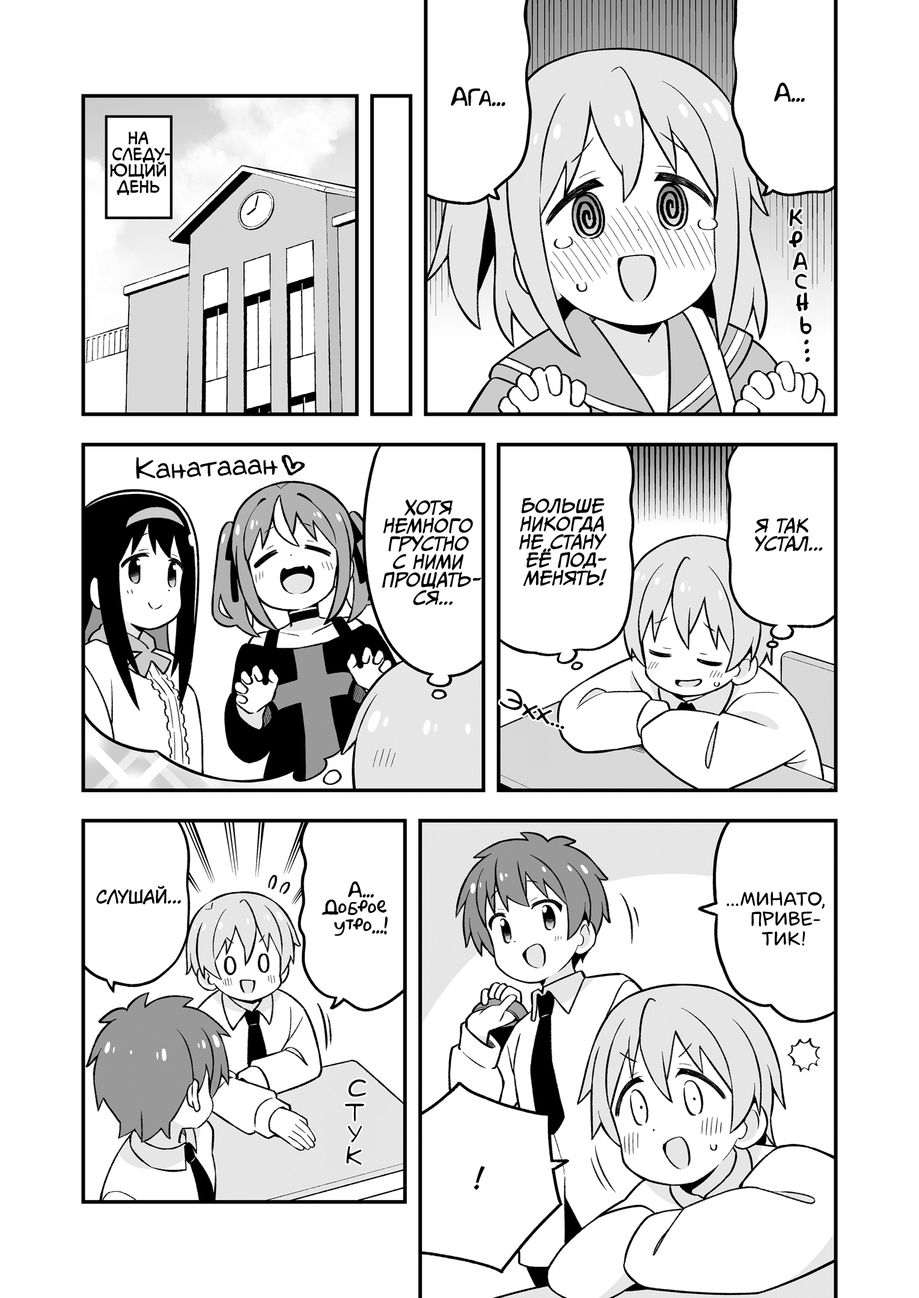
<style>
.page{position:relative;width:919px;height:1298px;background:#ffffff}
.page>*{position:absolute;margin:0}
.t1{font:21.6px "AkbarPlain";color:#000000}
.t2{font:16.2px "v_CCMonologous";color:#000000;text-transform:uppercase}
.t3{font:25.2px "AkbarPlain";color:#000000}
.t4{font:28.8px "v_Augie";color:#000000}
.t5{font:18px "CCMeanwhile";color:#000000;text-transform:uppercase;font-style:italic}
.t6{font:18px "AkbarPlain";color:#000000}
.t7{font:18px "KuraiVoice2";color:#000000;text-transform:uppercase}
.t8{font:19.8px "laCartoonerie";color:#000000;text-transform:uppercase}
.t9{font:23.4px "v_Augie";color:#000000;text-transform:uppercase}
.t10{font:28.8px "v_CCJeffCampbell";color:#000000;text-transform:uppercase}
</style>
<div class="page">
<p class="t1" style="left:451px;top:87px;width:54px;height:19px">Ага...</p>
<p class="t1" style="left:774px;top:82px;width:31px;height:20px">А...</p>
<p class="t2" style="left:110px;top:131px;width:61px;height:64px;text-align:center">На<br>следу-<br>ющий<br>день</p>
<p class="t3" style="left:789px;top:209px;width:13px;height:18px;rotate:-6deg">к</p>
<p class="t3" style="left:788px;top:231px;width:14px;height:17px;rotate:-7deg">р</p>
<p class="t3" style="left:793px;top:252px;width:15px;height:18px;rotate:-5deg">а</p>
<p class="t3" style="left:794px;top:273px;width:13px;height:16px;rotate:-5deg">с</p>
<p class="t3" style="left:796px;top:292px;width:13px;height:19px;rotate:-5deg">н</p>
<p class="t3" style="left:800px;top:316px;width:11px;height:18px;rotate:-6deg">ь</p>
<p class="t3" style="left:804px;top:339px;width:5px;height:5px">.</p>
<p class="t3" style="left:805px;top:349px;width:4px;height:4px">.</p>
<p class="t3" style="left:805px;top:357px;width:5px;height:5px">.</p>
<p class="t4" style="left:136px;top:457px;width:142px;height:22px;rotate:-2deg">Канатааан</p>
<p class="t5" style="left:519px;top:498px;width:88px;height:88px;text-align:center">Больше<br>никогда<br>не стану<br>её под-<br>менять!</p>
<p class="t5" style="left:382px;top:499px;width:99px;height:106px;text-align:center">Хотя<br>немного<br>грустно<br>с ними<br>прощать-<br>ся...</p>
<p class="t5" style="left:755px;top:517px;width:68px;height:35px;text-align:center">Я так<br>устал...</p>
<p class="t4" style="left:499px;top:689px;width:65px;height:40px;rotate:18deg">Эхх...</p>
<p class="t6" style="left:322px;top:881px;width:66px;height:55px;text-align:center">А...<br>Доброе<br>утро...!</p>
<p class="t7" style="left:96px;top:885px;width:85px;height:19px">Слушай...</p>
<p class="t8" style="left:726px;top:891px;width:98px;height:55px;text-align:center">...Минато,<br>приве-<br>тик!</p>
<p class="t9" style="left:348px;top:1079px;width:18px;height:18px">с</p>
<p class="t9" style="left:345px;top:1103px;width:19px;height:18px;rotate:5deg">т</p>
<p class="t9" style="left:347px;top:1125px;width:15px;height:17px;rotate:11deg">у</p>
<p class="t9" style="left:346px;top:1146px;width:16px;height:19px;rotate:5deg">к</p>
<p class="t10" style="left:473px;top:1166px;width:12px;height:24px">!</p>
</div>
